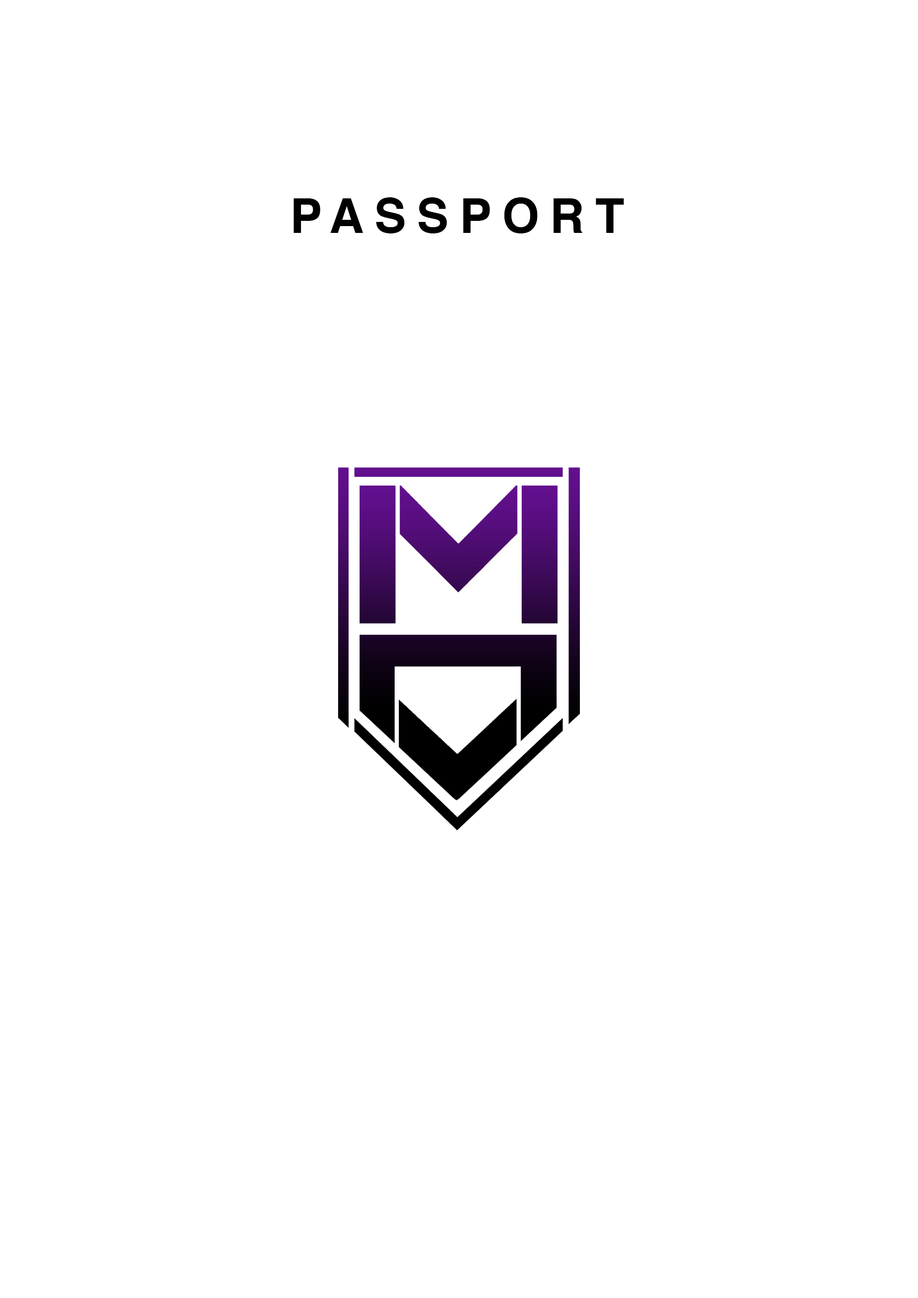
<style>
.page{position:relative;width:918px;height:1298px;background:#ffffff}
.page>*{position:absolute;margin:0}
.t1{font:48px "Helvetica-Bold";letter-spacing:0.22em;color:#000000}
</style>
<div class="page">
<p class="t1" style="left:294px;top:197px;width:330px;height:37px">PASSPORT</p>
</div>
